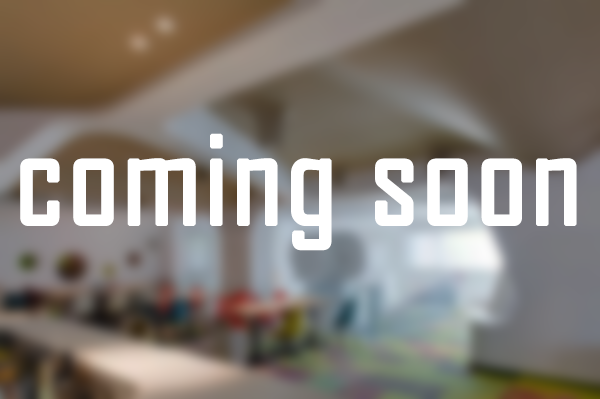
<style>
.page{position:relative;width:600px;height:399px}
.page>*{position:absolute;margin:0}
.t1{font:134px "AgencyFB-Reg";color:#ffffff;font-weight:bold}
</style>
<div class="page">
<p class="t1" style="left:20px;top:133px;width:557px;height:118px">coming soon</p>
</div>
